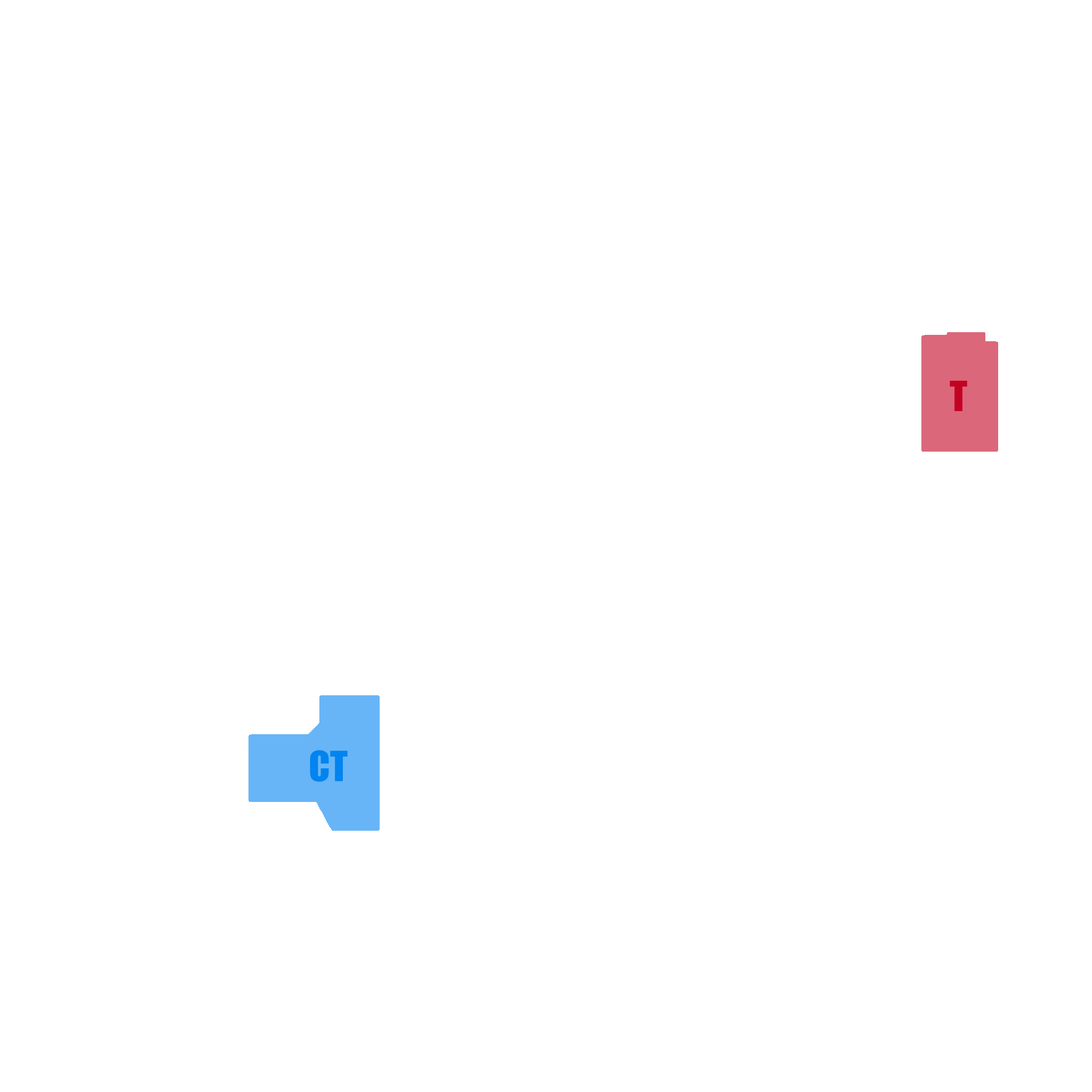
<style>
.page{position:relative;width:1092px;height:1092px;background:#ffffff}
.page>*{position:absolute;margin:0}
.t1{font:38.4px "Impact";color:#c30222}
.t2{font:38.4px "Impact";color:#0284f0}
</style>
<div class="page">
<p class="t1" style="left:950px;top:381px;width:17px;height:30px">T</p>
<p class="t2" style="left:310px;top:750px;width:38px;height:32px">CT</p>
</div>
